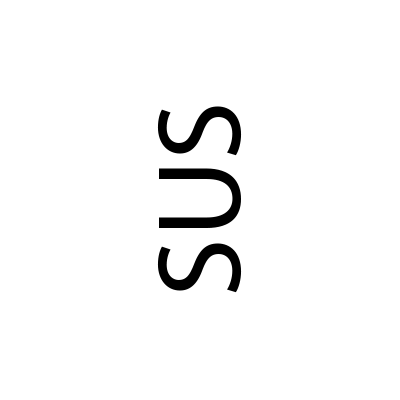
<style>
.page{position:relative;width:400px;height:400px;background:#ffffff}
.page>*{position:absolute;margin:0}
.t1{font:120px "MyriadPro-Regular";color:#000000}
</style>
<div class="page">
<p class="t1" style="left:157px;top:106px;width:85px;height:187px;rotate:-90deg">SUS</p>
</div>
